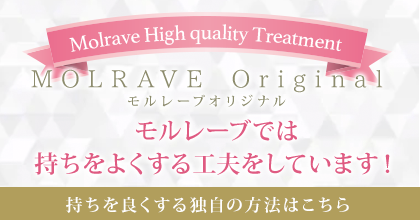
<style>
.page{position:relative;width:420px;height:220px}
.page>*{position:absolute;margin:0}
.t1{font:24px/28px "02UtsukushiMincho";letter-spacing:0.34em;color:#8d8c6e}
.t2{font:13px/28px "KozMinPr6N-Bold";letter-spacing:0.34em;color:#8d8c6e}
.t3{font:24px/33px "KozMinPr6N-Bold";letter-spacing:0.06em;color:#df5b82}
.t4{font:17px "KozMinPr6N-Bold";letter-spacing:0.14em;color:#ffffff}
</style>
<div class="page">
<p class="t1" style="left:31px;top:69px;width:352px;height:38px;text-align:center">MOLRAVE Original<br><span class="t2">モルレーブオリジナル</span></p>
<p class="t3" style="left:34px;top:119px;width:356px;height:56px;text-align:center">モルレーブでは<br>持ちをよくする工夫をしています！</p>
<p class="t4" style="left:66px;top:196px;width:283px;height:17px">持ちを良くする独自の方法はこちら</p>
</div>
